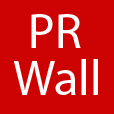
<style>
.page{position:relative;width:114px;height:114px;background:#cd0202}
.page>*{position:absolute;margin:0}
.t1{font:50px "MyriadPro-Regular";color:#fffefe}
</style>
<div class="page">
<p class="t1" style="left:31px;top:14px;width:50px;height:34px">PR</p>
<p class="t1" style="left:13px;top:59px;width:85px;height:36px">Wall</p>
</div>
